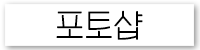
<style>
.page{position:relative;width:200px;height:50px;background:#ffffff}
.page>*{position:absolute;margin:0}
.t1{font:30px "KoreanYNSJG1-R";color:#000000;font-weight:bold}
</style>
<div class="page">
<p class="t1" style="left:56px;top:10px;width:87px;height:30px">포토샵</p>
</div>
